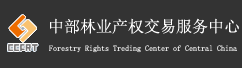
<style>
.page{position:relative;width:242px;height:68px;background:#333333}
.page>*{position:absolute;margin:0}
.t1{font:16px "SimSun";color:#ffffff}
.t2{font:8px "SimSun";color:#ffffff}
</style>
<div class="page">
<p class="t1" style="left:50px;top:18px;width:189px;height:16px">中部林业产权交易服务中心</p>
<p class="t2" style="left:49px;top:45px;width:188px;height:8px">Forestry Rights Treding Center of Central China</p>
</div>
